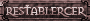
<style>
.page{position:relative;width:90px;height:21px}
.page>*{position:absolute;margin:0}
.t1{font:11.7px "Mason-Regular";letter-spacing:-0.1em;scale:1.03 1}
</style>
<div class="page">
<p class="t1" style="left:6px;top:5px;width:84px;height:12px">RESTABLERCER</p>
</div>
